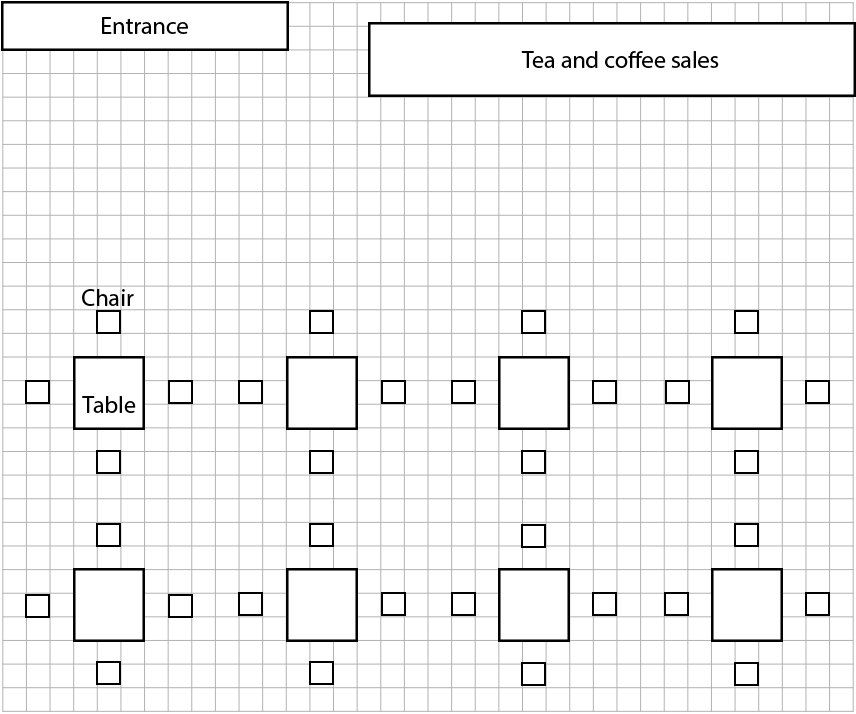
<style>
.page{position:relative;width:856px;height:714px;background:#ffffff}
.page>*{position:absolute;margin:0}
.t1{font:24px "MyriadPro-Regular";color:#000000}
</style>
<div class="page">
<p class="t1" style="left:102px;top:17px;width:86px;height:17px">Entrance</p>
<p class="t1" style="left:521px;top:51px;width:198px;height:17px">Tea and coffee sales</p>
<p class="t1" style="left:82px;top:289px;width:52px;height:17px">Chair</p>
<p class="t1" style="left:82px;top:396px;width:54px;height:17px">Table</p>
</div>
